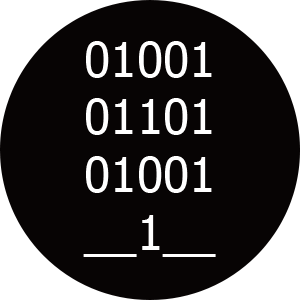
<style>
.page{position:relative;width:300px;height:300px;background:#070404}
.page>*{position:absolute;margin:0}
.t1{font:48px "Tahoma";color:#ffffff}
</style>
<div class="page">
<p class="t1" style="left:83px;top:41px;width:133px;height:216px">01001<br>01101<br>01001<br>__1__</p>
</div>
